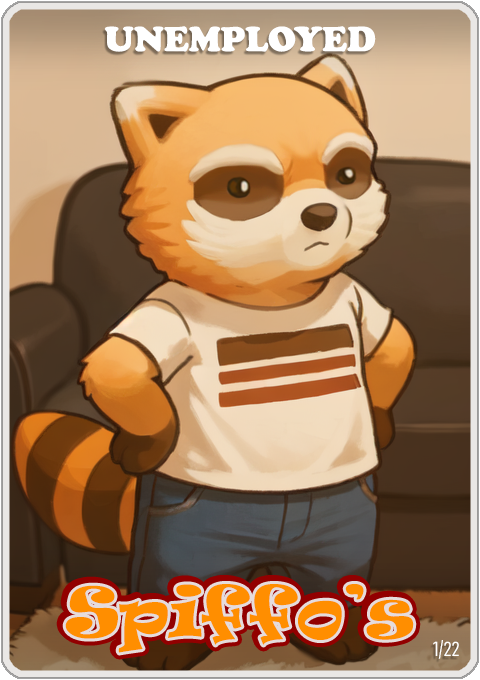
<style>
.page{position:relative;width:480px;height:680px}
.page>*{position:absolute;margin:0}
.t1{font:36px "CooperBlack";color:#ffffff}
.t2{font:65px "Ravie";color:#ff8e00}
.t3{font:20px "Bahnschrift-LightCondensed";color:#ffffff}
</style>
<div class="page">
<p class="t1" style="left:104px;top:26px;width:272px;height:26px">UNEMPLOYED</p>
<p class="t2" style="left:65px;top:584px;width:349px;height:69px">Spiffo’s</p>
<p class="t3" style="left:433px;top:640px;width:26px;height:19px">1/22</p>
</div>
